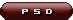
<style>
.page{position:relative;width:73px;height:20px}
.page>*{position:absolute;margin:0}
.t1{font:8px "04b09";color:#ded9d9}
</style>
<div class="page">
<p class="t1" style="left:22px;top:9px;width:30px;height:5px">P S D</p>
</div>
